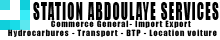
<style>
.page{position:relative;width:220px;height:40px;background:#ffffff}
.page>*{position:absolute;margin:0}
.t1{font:22.8px "Impact";letter-spacing:0.12em;color:#000000;scale:0.55 1}
.t2{font:8px "Impact";letter-spacing:0.12em;color:#000000}
</style>
<div class="page">
<p class="t1" style="left:33px;top:2px;width:186px;height:18px">STATION ABDOULAYE SERVICES</p>
<p class="t2" style="left:8px;top:29px;width:209px;height:8px">Hydrocarbures - Transport - BTP - Location voiture</p>
<p class="t2" style="left:51px;top:20px;width:140px;height:8px">Commerce General- Import Export</p>
</div>
